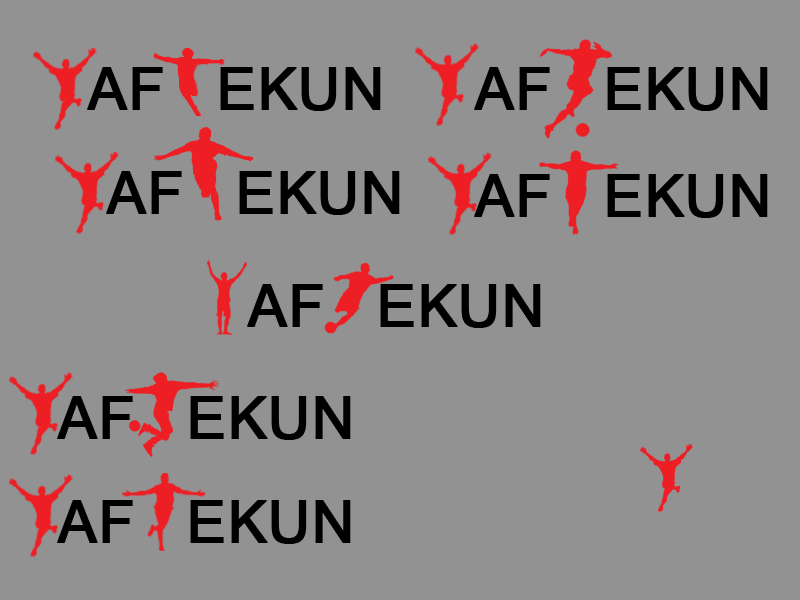
<style>
.page{position:relative;width:800px;height:600px;background:#929292}
.page>*{position:absolute;margin:0}
.t1{font:65px "Vrinda";color:#000000;font-weight:bold}
</style>
<div class="page">
<p class="t1" style="left:247px;top:284px;width:76px;height:43px">AF</p>
<p class="t1" style="left:380px;top:284px;width:161px;height:44px">EKUN</p>
</div>
